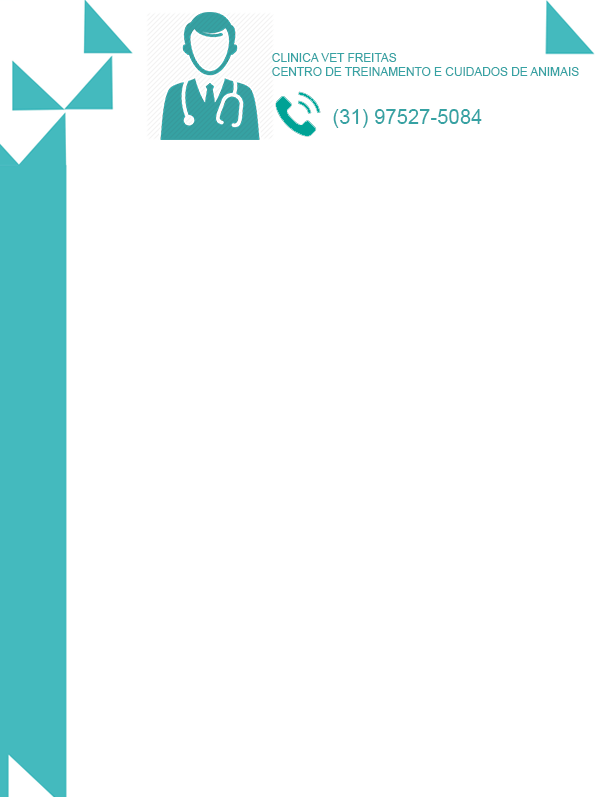
<style>
.page{position:relative;width:595px;height:797px;background:#ffffff}
.page>*{position:absolute;margin:0}
.t1{font:11.9px "ArialMT";color:#36a2a3}
.t2{font:20.3px "ArialMT";color:#36a2a3}
</style>
<div class="page">
<p class="t1" style="left:272px;top:53px;width:307px;height:23px">CLINICA VET FREITAS<br>CENTRO DE TREINAMENTO E CUIDADOS DE ANIMAIS</p>
<p class="t2" style="left:333px;top:109px;width:149px;height:19px">(31) 97527-5084</p>
</div>
